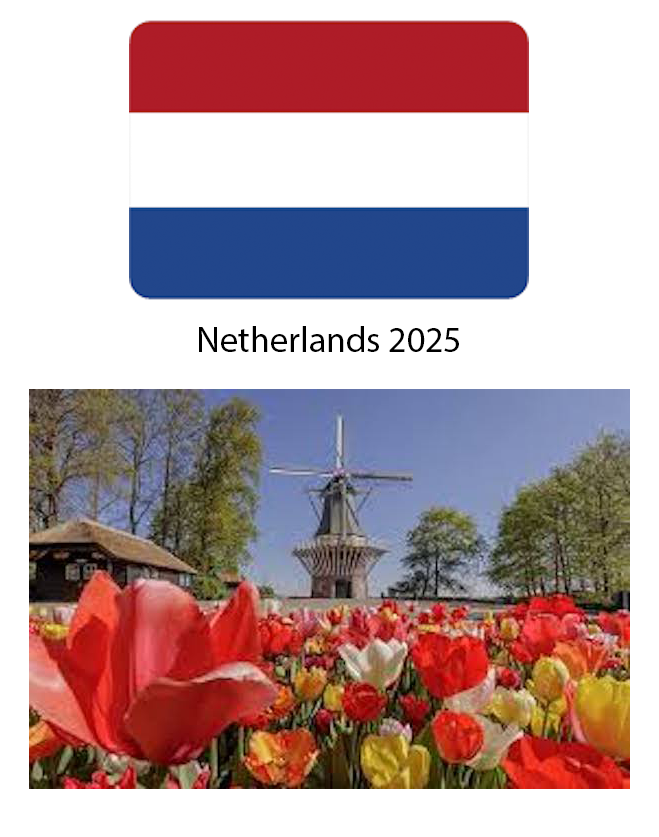
<style>
.page{position:relative;width:659px;height:837px;background:#ffffff}
.page>*{position:absolute;margin:0}
.t1{font:36px "MyriadPro-Regular";color:#000000}
</style>
<div class="page">
<p class="t1" style="left:199px;top:326px;width:260px;height:26px">Netherlands 2025</p>
</div>
